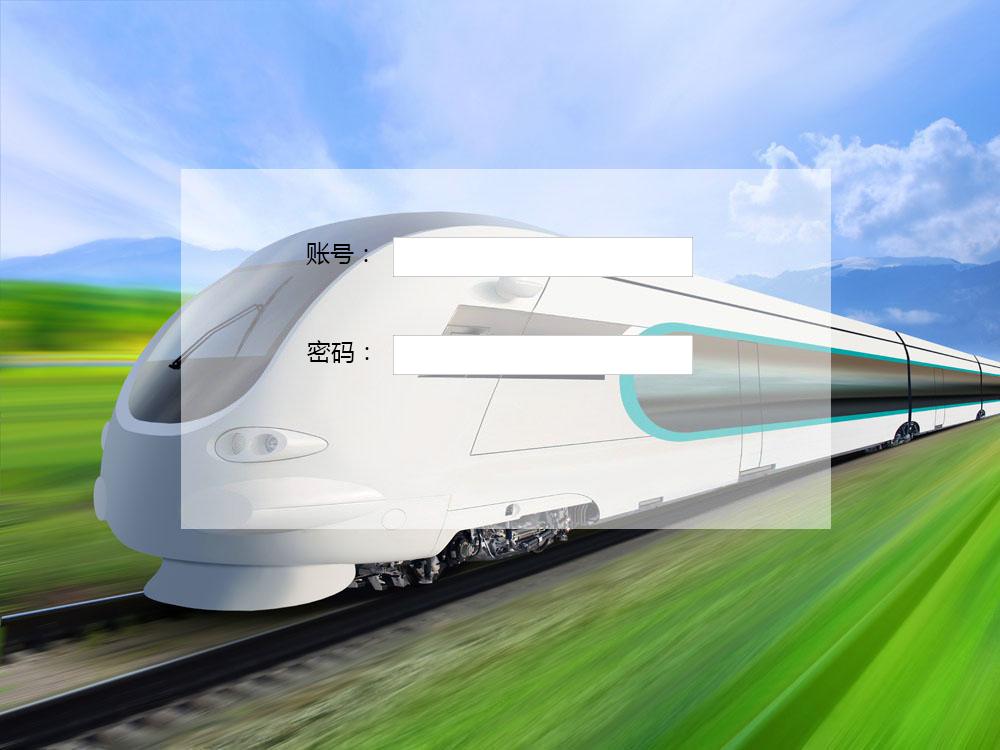
<style>
.page{position:relative;width:1000px;height:750px}
.page>*{position:absolute;margin:0}
.t1{font:24px "MicrosoftYaHei";color:#000000}
</style>
<div class="page">
<p class="t1" style="left:306px;top:242px;width:62px;height:23px">账号：</p>
<p class="t1" style="left:307px;top:340px;width:62px;height:23px">密码：</p>
</div>
